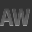
<style>
.page{position:relative;width:32px;height:32px;background:#333333}
.page>*{position:absolute;margin:0}
.t1{font:24px "HelveticaNeue-CondensedBold";color:#595959}
</style>
<div class="page">
<p class="t1" style="left:0px;top:8px;width:30px;height:17px">AW</p>
</div>
